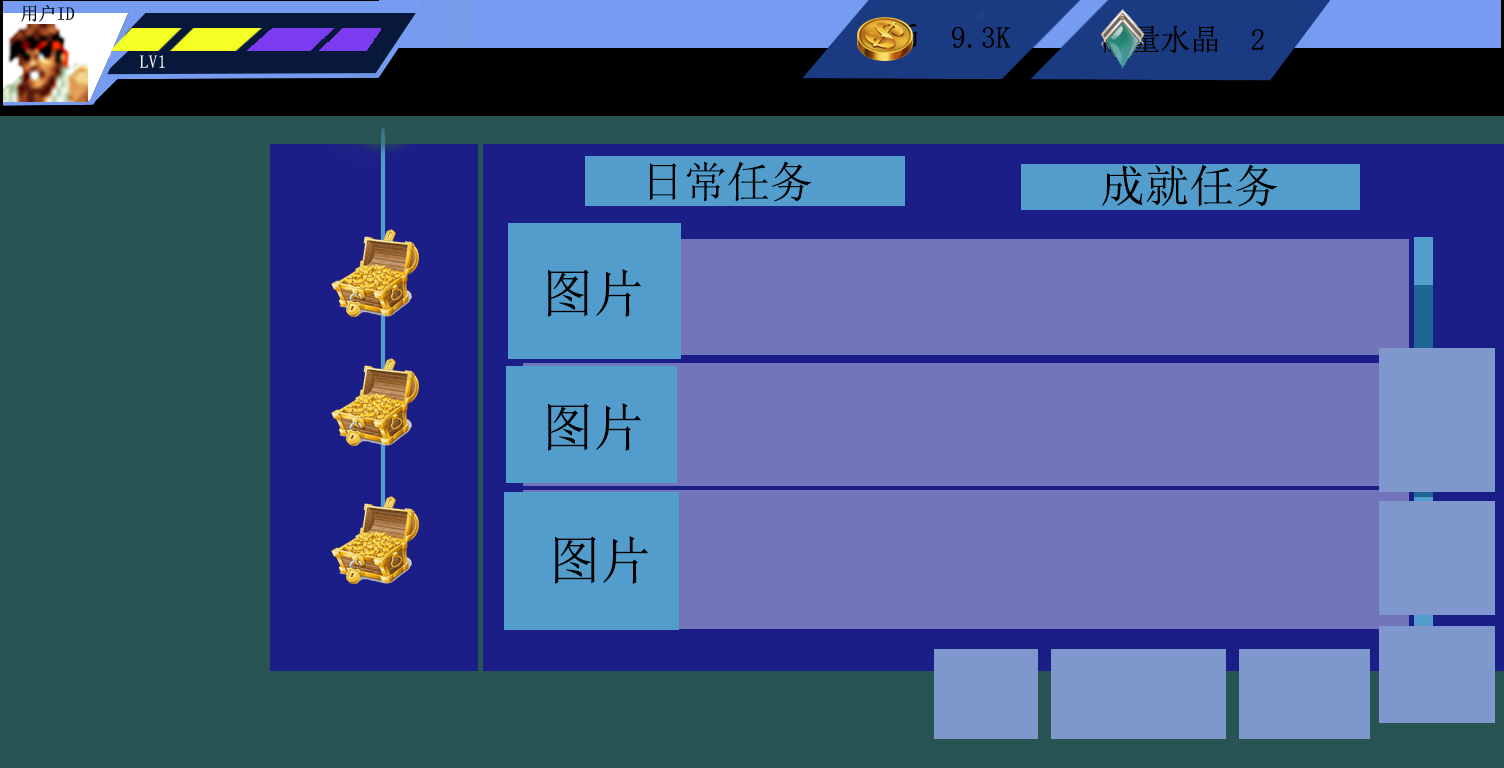
<style>
.page{position:relative;width:1504px;height:768px;background:#285454}
.page>*{position:absolute;margin:0}
.t1{font:43px "SimSun";color:#000000}
.t2{font:45px "SimSun";color:#000000}
.t3{font:52px "SimSun";color:#000000}
</style>
<div class="page">
<p class="t1" style="left:650px;top:161px;width:161px;height:41px">日常任务</p>
<p class="t2" style="left:1102px;top:164px;width:175px;height:43px">成就任务</p>
<p class="t3" style="left:548px;top:269px;width:93px;height:48px">图片</p>
<p class="t3" style="left:548px;top:403px;width:93px;height:48px">图片</p>
<p class="t3" style="left:555px;top:536px;width:93px;height:48px">图片</p>
</div>
